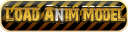
<style>
.page{position:relative;width:128px;height:32px}
.page>*{position:absolute;margin:0}
.t1{font:18.9px "28DaysLater";scale:0.91 1}
.t2{font:18.9px "28DaysLater";color:#c9c8c8;scale:0.91 1}
</style>
<div class="page">
<p class="t1" style="left:6px;top:6px;width:49px;height:16px">Load A</p>
<p class="t2" style="left:55px;top:8px;width:9px;height:14px">n</p>
<p class="t1" style="left:65px;top:7px;width:60px;height:15px">im Model</p>
</div>
